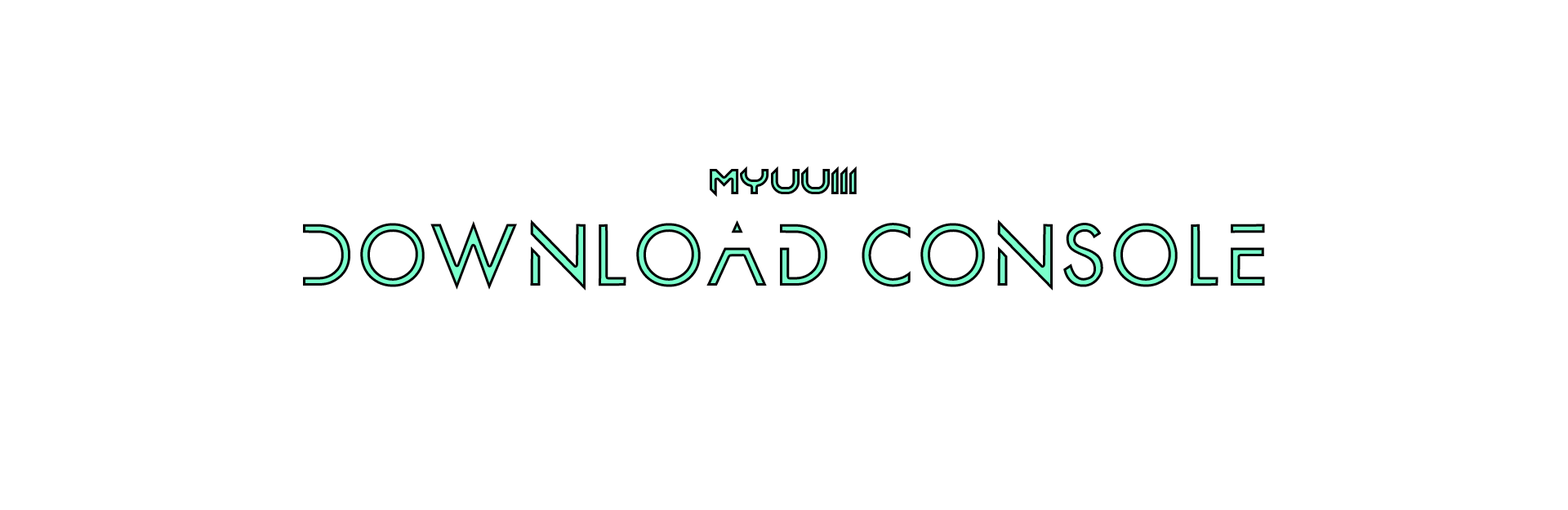
<style>
.page{position:relative;width:1568px;height:510px;background:#ffffff}
.page>*{position:absolute;margin:0}
.t1{font:36.7px "Chopsic"}
.t2{font:81.7px "AlphaCentauri"}
</style>
<div class="page">
<p class="t1" style="left:710px;top:166px;width:147px;height:32px">Myuuiii</p>
<p class="t2" style="left:303px;top:220px;width:962px;height:71px">Download Console</p>
</div>
